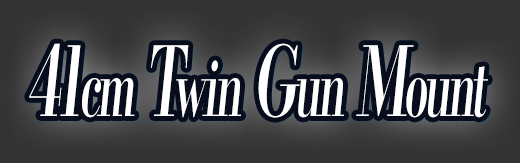
<style>
.page{position:relative;width:520px;height:163px}
.page>*{position:absolute;margin:0}
.t1{font:76.8px "KochoStd-Heavy";letter-spacing:-0.08em;color:#ffffff;font-style:italic;scale:0.57 1}
.t2{font:96px "KochoStd-Heavy";letter-spacing:-0.08em;color:#ffffff;font-style:italic;scale:0.57 1}
</style>
<div class="page">
<p class="t1" style="left:29px;top:43px;width:459px;height:75px"><span class="t2">41</span>cm<span class="t2"> T</span>win<span class="t2"> G</span>un<span class="t2"> M</span>ount</p>
</div>
